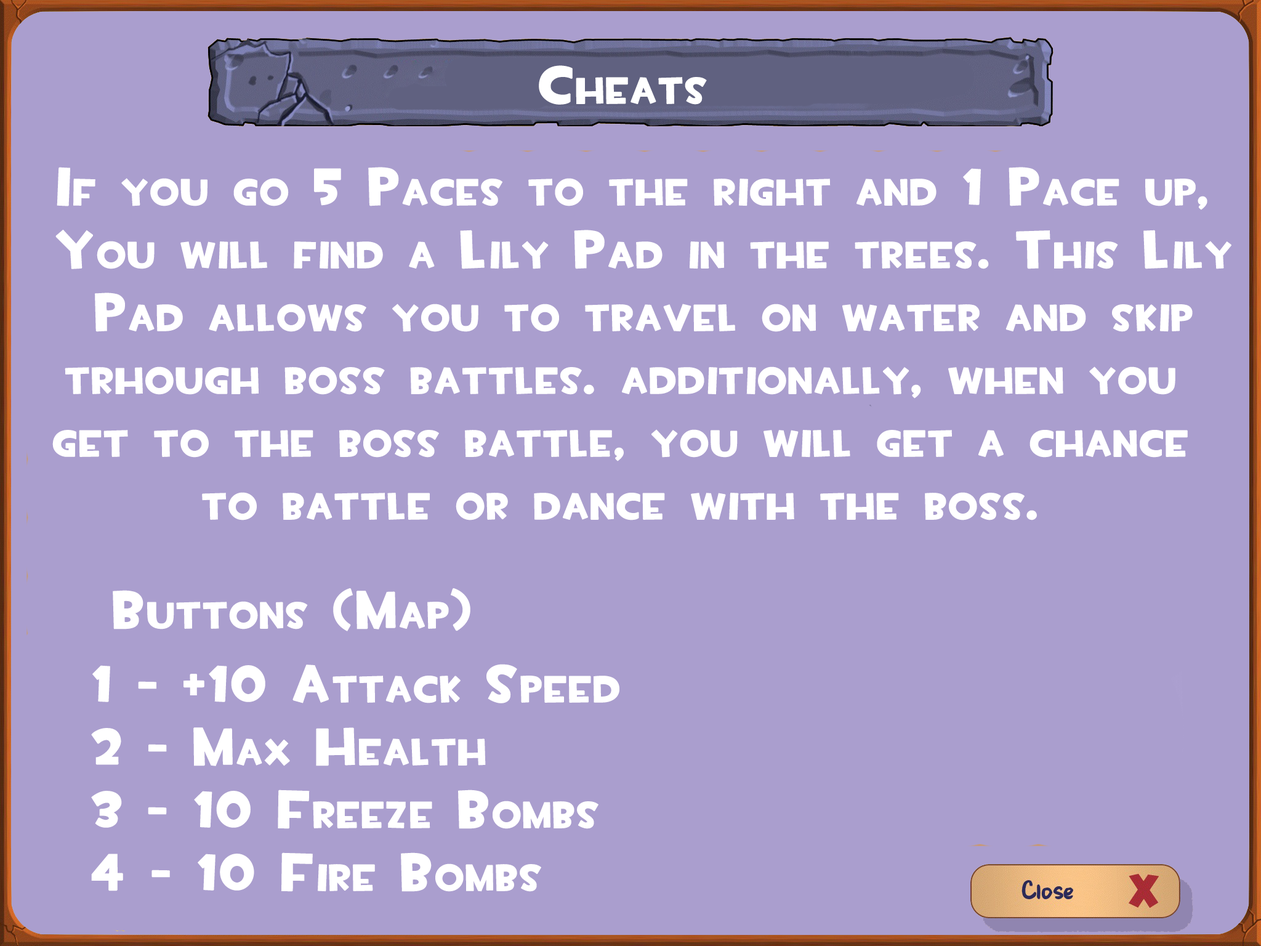
<style>
.page{position:relative;width:1261px;height:946px;background:#aa9ece}
.page>*{position:absolute;margin:0}
.t1{font:52.3px "TF2Build";letter-spacing:0.025em;color:#ffffff;font-variant:small-caps;font-weight:bold}
</style>
<div class="page">
<p class="t1" style="left:539px;top:65px;width:168px;height:40px">Cheats</p>
<p class="t1" style="left:52px;top:167px;width:1179px;height:353px;text-align:center">If you go 5 Paces to the right and 1 Pace up,<br> You will find a Lily Pad in the trees. This Lily<br> Pad allows you to travel on water and skip<br>trhough boss battles. additionally, when you <br>get to the boss battle, you will get a chance <br>to battle or dance with the boss.</p>
<p class="t1" style="left:113px;top:588px;width:357px;height:43px">Buttons (Map)</p>
<p class="t1" style="left:91px;top:664px;width:528px;height:228px">1 - +10 Attack Speed<br>2 - Max Health <br>3 - 10 Freeze Bombs<br>4 - 10 Fire Bombs</p>
</div>
